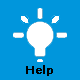
<style>
.page{position:relative;width:80px;height:80px;background:#0096dc}
.page>*{position:absolute;margin:0}
.t1{font:11.1px "MicrosoftYaHei";color:#000000;font-weight:bold}
</style>
<div class="page">
<p class="t1" style="left:26px;top:65px;width:27px;height:11px">Help</p>
</div>
